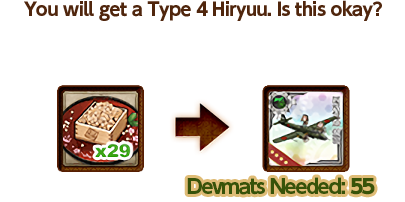
<style>
.page{position:relative;width:405px;height:202px;background:#ffffff}
.page>*{position:absolute;margin:0}
.t1{font:18px "UDShinGoPro-Bold";letter-spacing:-0.04em;color:#50260d}
.t2{font:20px "UDShinGoPro-Bold";letter-spacing:-0.08em;color:#375309}
.t3{font:20px "UDShinGoPro-Bold";letter-spacing:-0.08em;color:#375309;font-weight:bold}
</style>
<div class="page">
<p class="t1" style="left:24px;top:0px;width:358px;height:21px">You will get a Type 4 Hiryuu. Is this okay?</p>
<p class="t2" style="left:187px;top:177px;width:188px;height:18px">Devmats Needed: <span class="t3">55</span></p>
</div>
